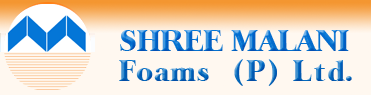
<style>
.page{position:relative;width:371px;height:95px;background:#fff8f0}
.page>*{position:absolute;margin:0}
.t1{font:30px/30px "LongIsland";letter-spacing:0.01em}
.t2{font:30px/30px "LongIsland";letter-spacing:0.025em}
.t3{font:30px/30px "LongIsland";letter-spacing:0.1em}
.t4{font:30px/30px "LongIsland"}
</style>
<div class="page">
<p class="t1" style="left:119px;top:30px;width:233px;height:56px;text-align:justify">SHREE MALANI<br><span class="t2">Foams</span><span class="t3">  (P) Lt</span><span class="t4">d.</span></p>
</div>
